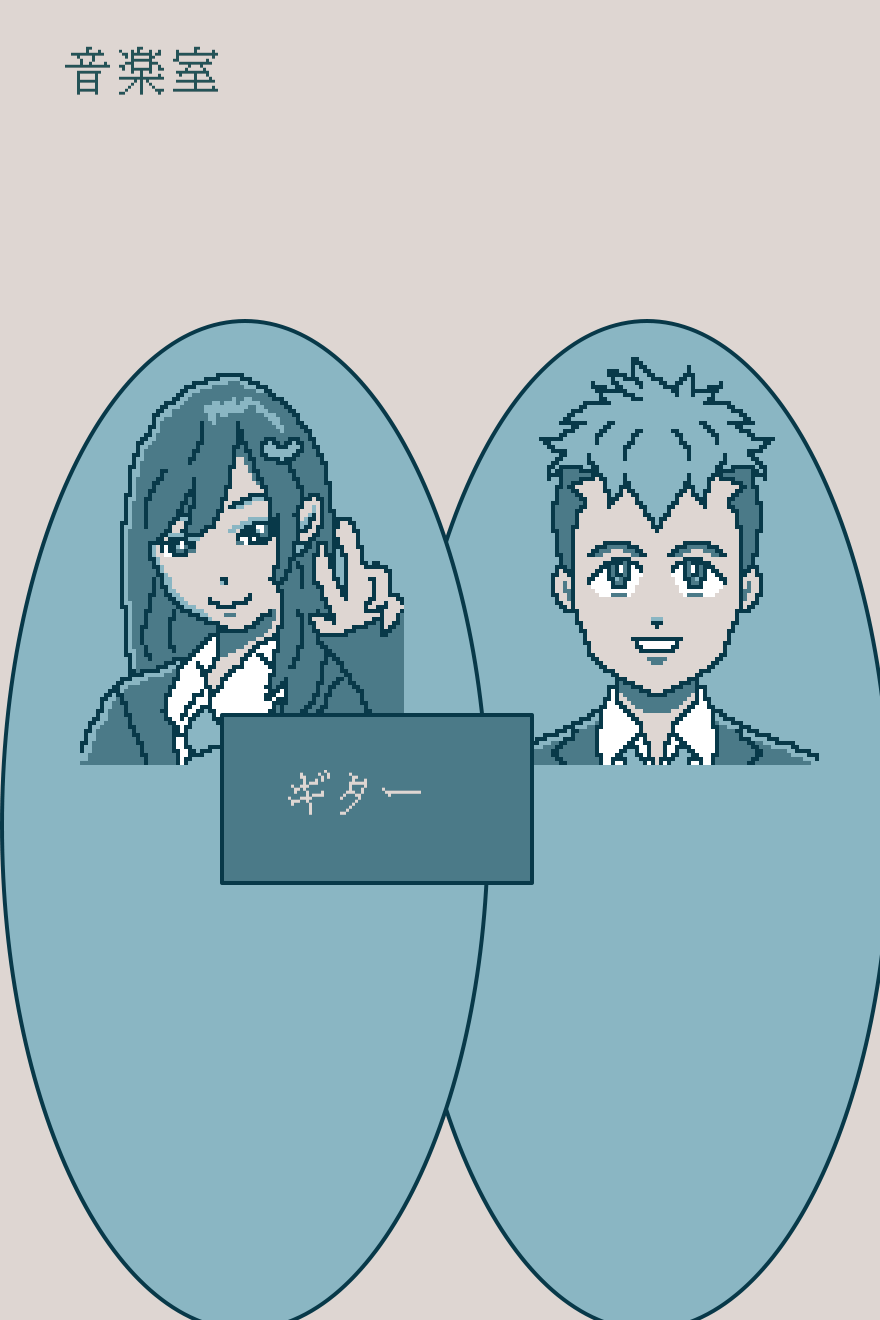
<style>
.page{position:relative;width:880px;height:1320px;background:#8ab6c3}
.page>*{position:absolute;margin:0}
.t1{font:48px "KH-Dot-kagurazaka-16";letter-spacing:0.14em;color:#1e4f5e}
.t2{font:48px "KH-Dot-kagurazaka-16";letter-spacing:0.14em;color:#e0d8d1}
</style>
<div class="page">
<p class="t1" style="left:65px;top:46px;width:153px;height:49px">音楽室</p>
<p class="t2" style="left:288px;top:770px;width:133px;height:45px">ギター</p>
</div>
